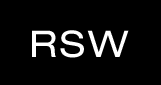
<style>
.page{position:relative;width:161px;height:85px;background:#000000}
.page>*{position:absolute;margin:0}
.t1{font:36.7px "HelveticaNeueLTPro-Ex";letter-spacing:0.09em;color:#ffffff;text-transform:uppercase}
</style>
<div class="page">
<p class="t1" style="left:32px;top:30px;width:97px;height:28px">RSW</p>
</div>
